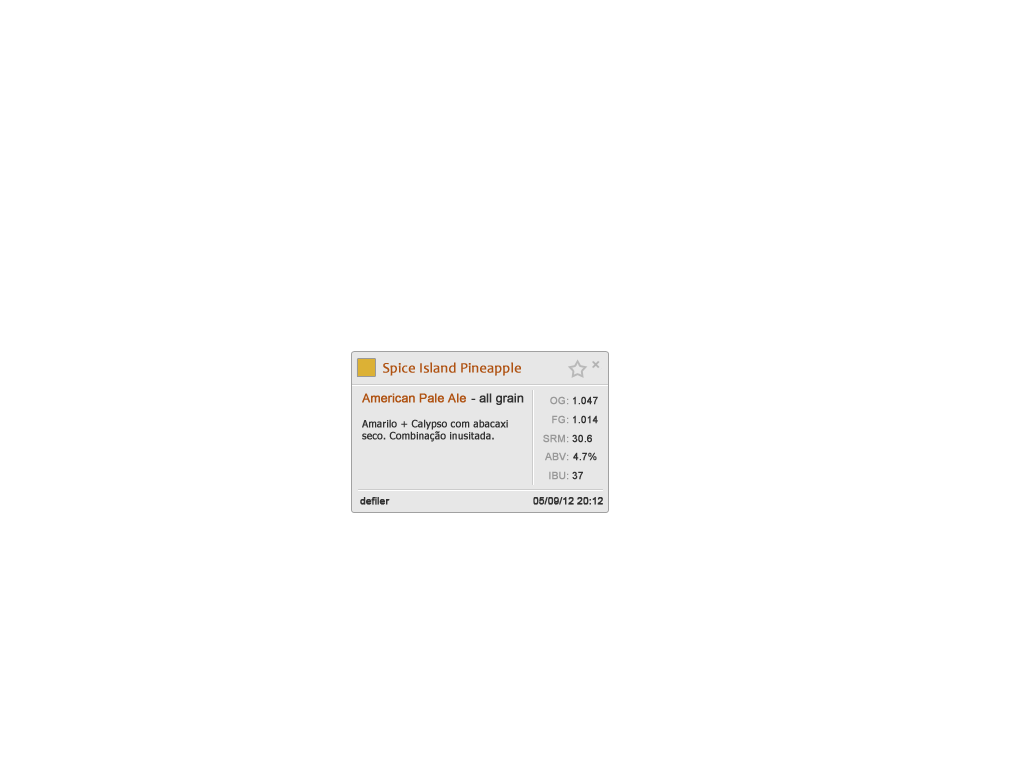
<style>
.page{position:relative;width:1024px;height:768px;background:#ffffff}
.page>*{position:absolute;margin:0}
.t1{font:14px "Candara";color:#af5212;font-weight:bold}
.t2{font:12px "ArialMT";color:#af5212;font-weight:bold}
.t3{font:12px "ArialMT";color:#333333;font-weight:bold}
.t4{font:10px "ArialMT";color:#999999;font-weight:bold}
.t5{font:10px "ArialMT";color:#333333;font-weight:bold}
.t6{font:10px "Tahoma";color:#333333;font-weight:bold}
</style>
<div class="page">
<p class="t1" style="left:383px;top:362px;width:138px;height:14px">Spice Island Pineapple</p>
<p class="t2" style="left:362px;top:393px;width:104px;height:10px">American Pale Ale</p>
<p class="t3" style="left:471px;top:393px;width:53px;height:12px">- all grain</p>
<p class="t4" style="left:550px;top:396px;width:19px;height:9px">OG:</p>
<p class="t5" style="left:573px;top:396px;width:25px;height:9px">1.047</p>
<p class="t6" style="left:362px;top:419px;width:146px;height:23px">Amarilo + Calypso com abacaxi <br>seco. Combinação inusitada.</p>
<p class="t4" style="left:552px;top:415px;width:17px;height:9px">FG:</p>
<p class="t5" style="left:573px;top:415px;width:25px;height:9px">1.014</p>
<p class="t4" style="left:543px;top:434px;width:26px;height:9px">SRM:</p>
<p class="t5" style="left:572px;top:434px;width:20px;height:9px">30.6</p>
<p class="t4" style="left:545px;top:452px;width:24px;height:9px">ABV:</p>
<p class="t5" style="left:573px;top:452px;width:24px;height:9px">4.7%</p>
<p class="t4" style="left:549px;top:471px;width:20px;height:9px">IBU:</p>
<p class="t5" style="left:572px;top:471px;width:11px;height:9px">37</p>
<p class="t5" style="left:360px;top:497px;width:30px;height:8px">defiler</p>
<p class="t5" style="left:533px;top:497px;width:70px;height:8px">05/09/12 20:12</p>
</div>
